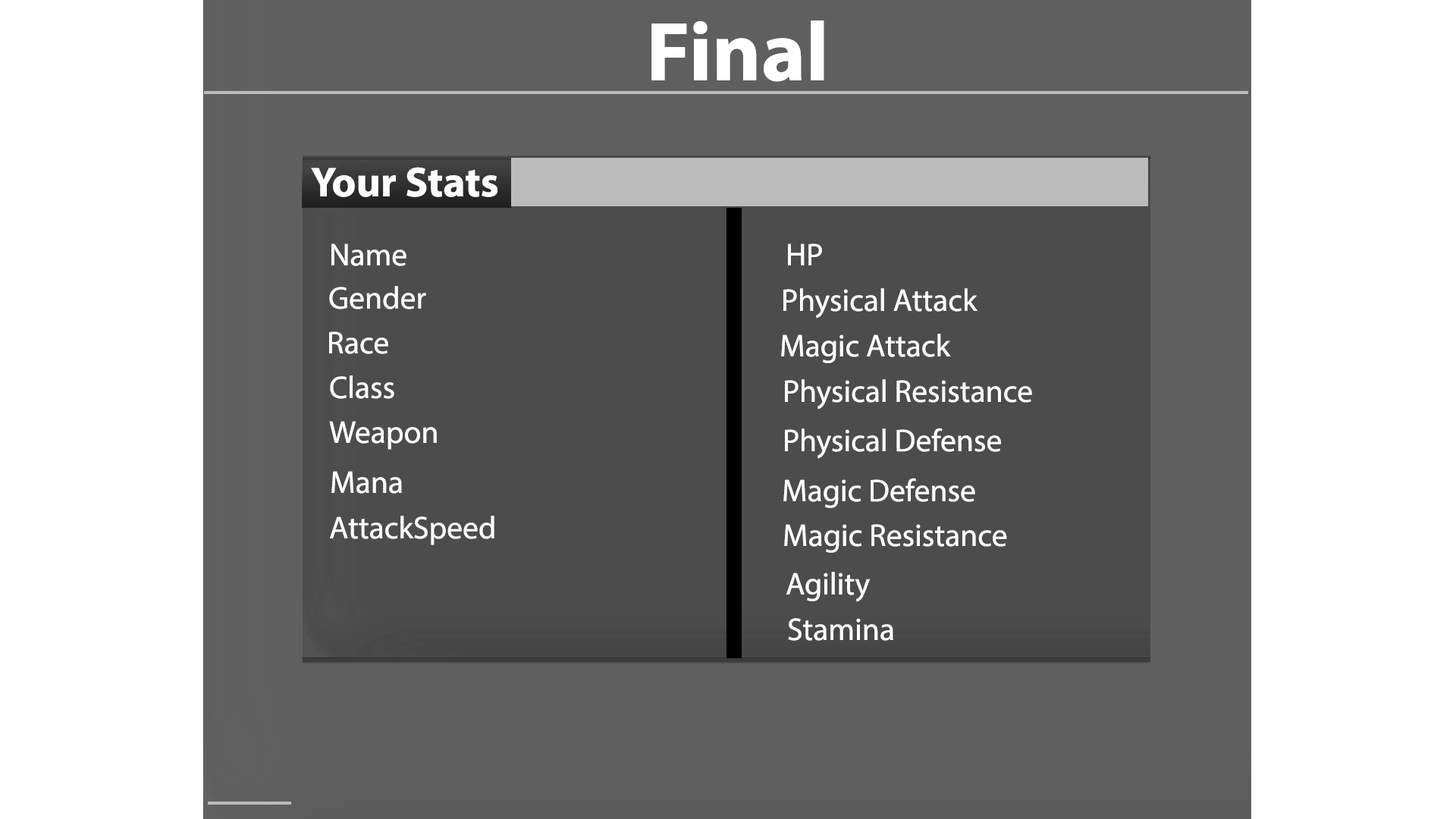
<style>
.page{position:relative;width:1456px;height:819px;background:#ffffff}
.page>*{position:absolute;margin:0}
.t1{font:84.3px "MyriadPro-Bold";color:#ffffff}
.t2{font:42.1px "MyriadPro-Bold";color:#ffffff}
.t3{font:31.6px "MyriadPro-Regular";color:#ffffff}
</style>
<div class="page">
<p class="t1" style="left:651px;top:20px;width:173px;height:62px">Final</p>
<p class="t2" style="left:311px;top:167px;width:186px;height:30px">Your Stats</p>
<p class="t3" style="left:331px;top:243px;width:75px;height:23px">Name</p>
<p class="t3" style="left:788px;top:243px;width:34px;height:22px">HP</p>
<p class="t3" style="left:329px;top:286px;width:97px;height:23px">Gender</p>
<p class="t3" style="left:783px;top:288px;width:194px;height:30px">Physical Attack</p>
<p class="t3" style="left:329px;top:331px;width:59px;height:23px">Race</p>
<p class="t3" style="left:781px;top:334px;width:170px;height:29px">Magic Attack</p>
<p class="t3" style="left:330px;top:375px;width:64px;height:24px">Class</p>
<p class="t3" style="left:785px;top:379px;width:247px;height:30px">Physical Resistance</p>
<p class="t3" style="left:329px;top:421px;width:108px;height:29px">Weapon</p>
<p class="t3" style="left:785px;top:428px;width:216px;height:31px">Physical Defense</p>
<p class="t3" style="left:331px;top:471px;width:71px;height:23px">Mana</p>
<p class="t3" style="left:783px;top:478px;width:192px;height:30px">Magic Defense</p>
<p class="t3" style="left:330px;top:516px;width:164px;height:29px">AttackSpeed</p>
<p class="t3" style="left:784px;top:524px;width:223px;height:29px">Magic Resistance</p>
<p class="t3" style="left:786px;top:572px;width:84px;height:30px">Agility</p>
<p class="t3" style="left:788px;top:618px;width:105px;height:23px">Stamina</p>
</div>
